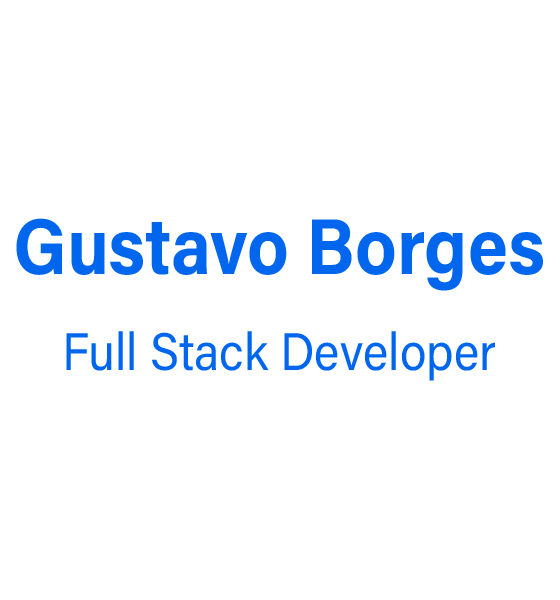
<style>
.page{position:relative;width:560px;height:600px;background:#ffffff}
.page>*{position:absolute;margin:0}
.t1{font:52.8px/96px "AcuminConcept-Regular";color:#0066ed;scale:0.91 1}
.t2{font:79.2px/96px "AcuminConcept-Bold";color:#0066ed;scale:0.91 1}
</style>
<div class="page">
<p class="t1" style="left:16px;top:218px;width:527px;height:163px;text-align:center"><span class="t2">Gustavo Borges<br></span>Full Stack Developer</p>
</div>
